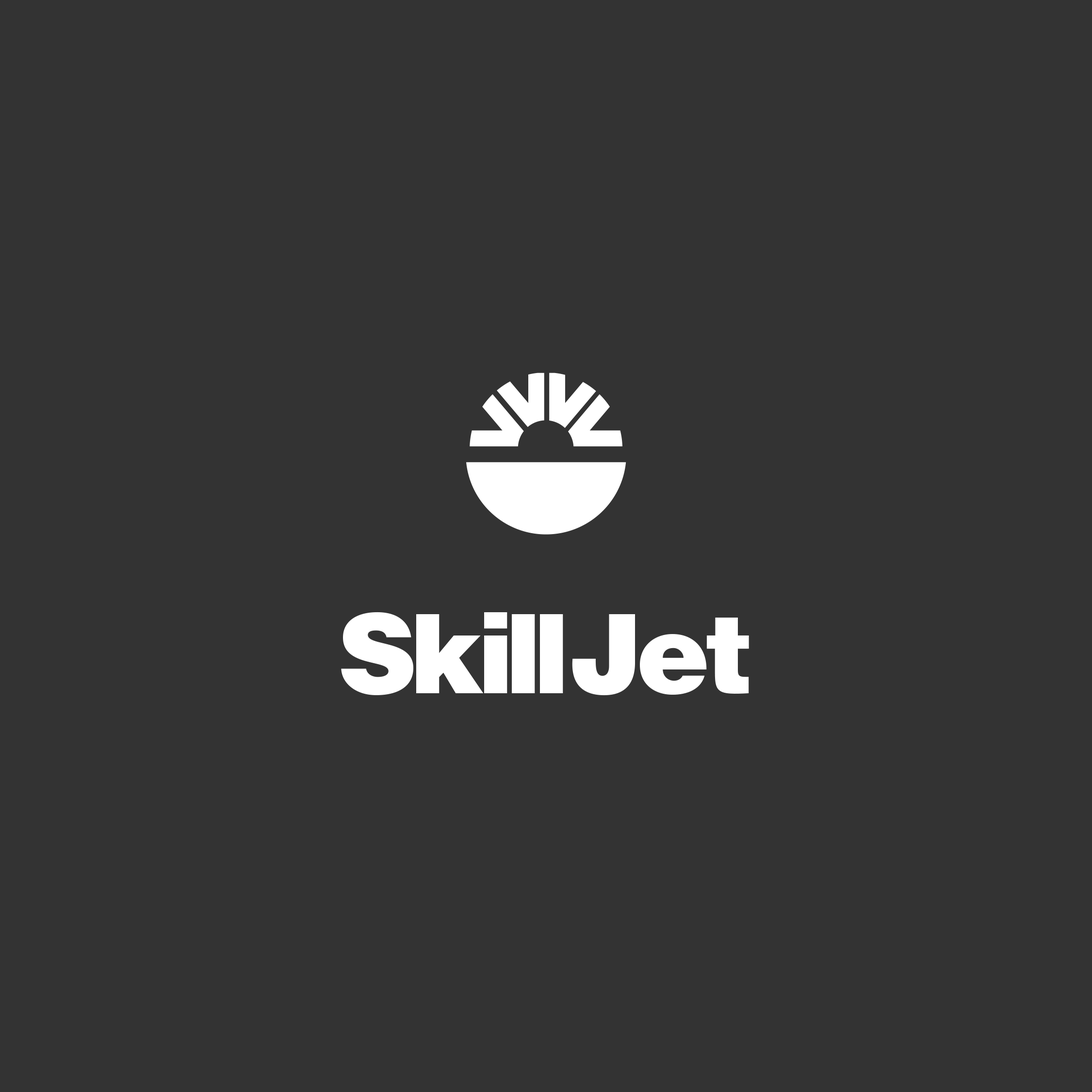
<style>
.page{position:relative;width:1092px;height:1092px;background:#333333}
.page>*{position:absolute;margin:0}
.t1{font:109.9px "Helvetica-Black";color:#ffffff}
</style>
<div class="page">
<p class="t1" style="left:341px;top:612px;width:408px;height:84px">SkillJet</p>
</div>
